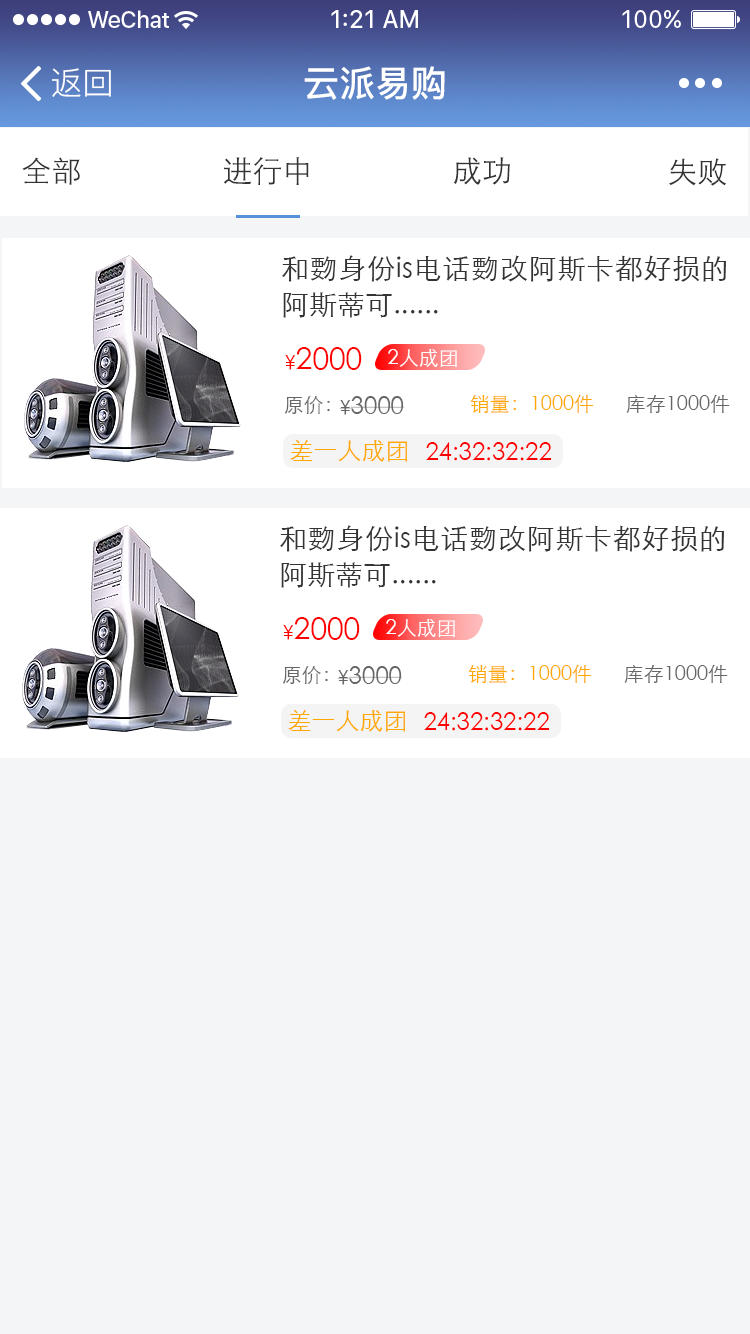
<style>
.page{position:relative;width:750px;height:1334px;background:#f4f5f6}
.page>*{position:absolute;margin:0}
.t1{font:32px "PingFang-SC-Regular";color:#ffffff}
.t2{font:36px "PingFang-SC-Bold";color:#ffffff}
.t3{font:30px "STXihei";color:#333333}
.t4{font:28px/36px "STXihei";color:#333333}
.t5{font:30px "STXihei";color:#ff0000}
.t6{font:20px "STXihei";color:#ff0000}
.t7{font:20px "STXihei";color:#ffffff}
.t8{font:20px "STXihei";color:#666666}
.t9{font:24px "STXihei";color:#666666}
.t10{font:20px "STXihei";color:#ffa800}
.t11{font:24px "STXihei";color:#ffa800}
.t12{font:24px "STXihei";color:#ff0000}
</style>
<div class="page">
<p class="t1" style="left:52px;top:68px;width:59px;height:29px">返回</p>
<p class="t2" style="left:304px;top:66px;width:141px;height:34px">云派易购</p>
<p class="t3" style="left:22px;top:157px;width:58px;height:28px">全部</p>
<p class="t3" style="left:224px;top:157px;width:85px;height:28px">进行中</p>
<p class="t3" style="left:453px;top:157px;width:57px;height:28px">成功</p>
<p class="t3" style="left:669px;top:158px;width:58px;height:28px">失败</p>
<p class="t4" style="left:282px;top:255px;width:445px;height:63px;text-align:justify">和覅身份is电话覅改阿斯卡都好损的阿斯蒂可......</p>
<p class="t5" style="left:285px;top:347px;width:77px;height:23px"><span class="t6">¥</span>2000</p>
<p class="t7" style="left:388px;top:349px;width:69px;height:18px">2人成团</p>
<p class="t8" style="left:284px;top:396px;width:46px;height:19px">原价：</p>
<p class="t9" style="left:339px;top:396px;width:65px;height:19px"><span class="t8">¥</span>3000</p>
<p class="t10" style="left:470px;top:394px;width:124px;height:19px">销量：1000件</p>
<p class="t8" style="left:626px;top:394px;width:104px;height:19px">库存1000件</p>
<p class="t11" style="left:290px;top:440px;width:118px;height:22px">差一人成团</p>
<p class="t12" style="left:426px;top:442px;width:126px;height:19px">24:32:32:22</p>
<p class="t4" style="left:280px;top:525px;width:445px;height:63px;text-align:justify">和覅身份is电话覅改阿斯卡都好损的阿斯蒂可......</p>
<p class="t5" style="left:283px;top:617px;width:77px;height:23px"><span class="t6">¥</span>2000</p>
<p class="t7" style="left:386px;top:619px;width:69px;height:18px">2人成团</p>
<p class="t10" style="left:468px;top:664px;width:124px;height:19px">销量：1000件</p>
<p class="t8" style="left:624px;top:664px;width:104px;height:19px">库存1000件</p>
<p class="t8" style="left:282px;top:666px;width:46px;height:19px">原价：</p>
<p class="t9" style="left:337px;top:666px;width:65px;height:19px"><span class="t8">¥</span>3000</p>
<p class="t11" style="left:288px;top:710px;width:118px;height:22px">差一人成团</p>
<p class="t12" style="left:424px;top:712px;width:126px;height:19px">24:32:32:22</p>
</div>
